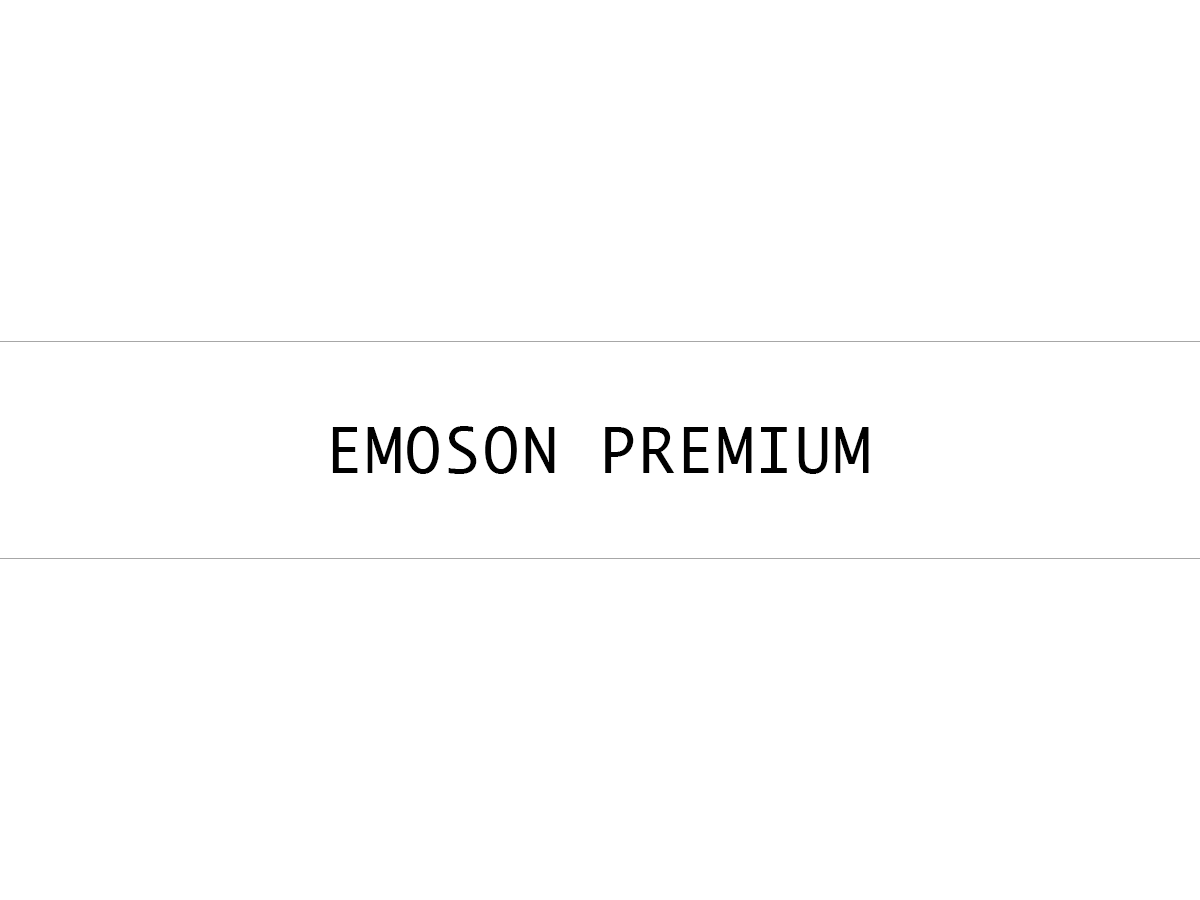
<style>
.page{position:relative;width:1200px;height:900px;background:#ffffff}
.page>*{position:absolute;margin:0}
.t1{font:60px "Monaco";letter-spacing:0.05em;color:#000000}
</style>
<div class="page">
<p class="t1" style="left:332px;top:426px;width:537px;height:48px">EMOSON PREMIUM</p>
</div>
